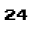
<style>
.page{position:relative;width:32px;height:32px;background:#ffffff}
.page>*{position:absolute;margin:0}
.t1{font:12px "PressStartK";color:#000000}
</style>
<div class="page">
<p class="t1" style="left:4px;top:9px;width:24px;height:11px">24</p>
</div>
